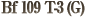
<style>
.page{position:relative;width:111px;height:18px;background:#ffffff}
.page>*{position:absolute;margin:0}
.t1{font:16px "RyuminPro-ExBold";letter-spacing:-0.08em;color:#4a3f32;font-weight:bold;scale:0.9 1}
</style>
<div class="page">
<p class="t1" style="left:1px;top:1px;width:84px;height:16px">Bf 109 T-3 (G)</p>
</div>
